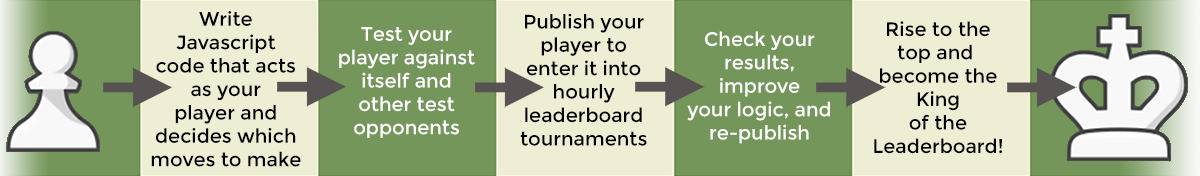
<style>
.page{position:relative;width:1200px;height:176px;background:#eeeed4}
.page>*{position:absolute;margin:0}
.t1{font:19.5px "Montserrat-Regular";color:#000000}
.t2{font:19.5px "Montserrat-Regular";color:#ffffff}
</style>
<div class="page">
<p class="t1" style="left:151px;top:11px;width:150px;height:156px;text-align:center">Write<br>Javascript<br>code that acts<br>as your<br>player and<br>decides which<br>moves to make</p>
<p class="t1" style="left:520px;top:13px;width:127px;height:133px;text-align:center">Publish your<br>player to<br>enter it into<br>hourly<br>leaderboard<br>tournaments</p>
<p class="t2" style="left:339px;top:27px;width:136px;height:111px;text-align:center">Test your<br>player against<br>itself and<br>other test<br>opponents</p>
<p class="t1" style="left:874px;top:21px;width:128px;height:133px;text-align:center">Rise to the<br>top and <br>become the<br>King<br>of the<br>Leaderboard!</p>
<p class="t2" style="left:687px;top:31px;width:143px;height:113px;text-align:center">Check your<br>results,<br>improve<br>your logic, and<br>re-publish</p>
</div>
